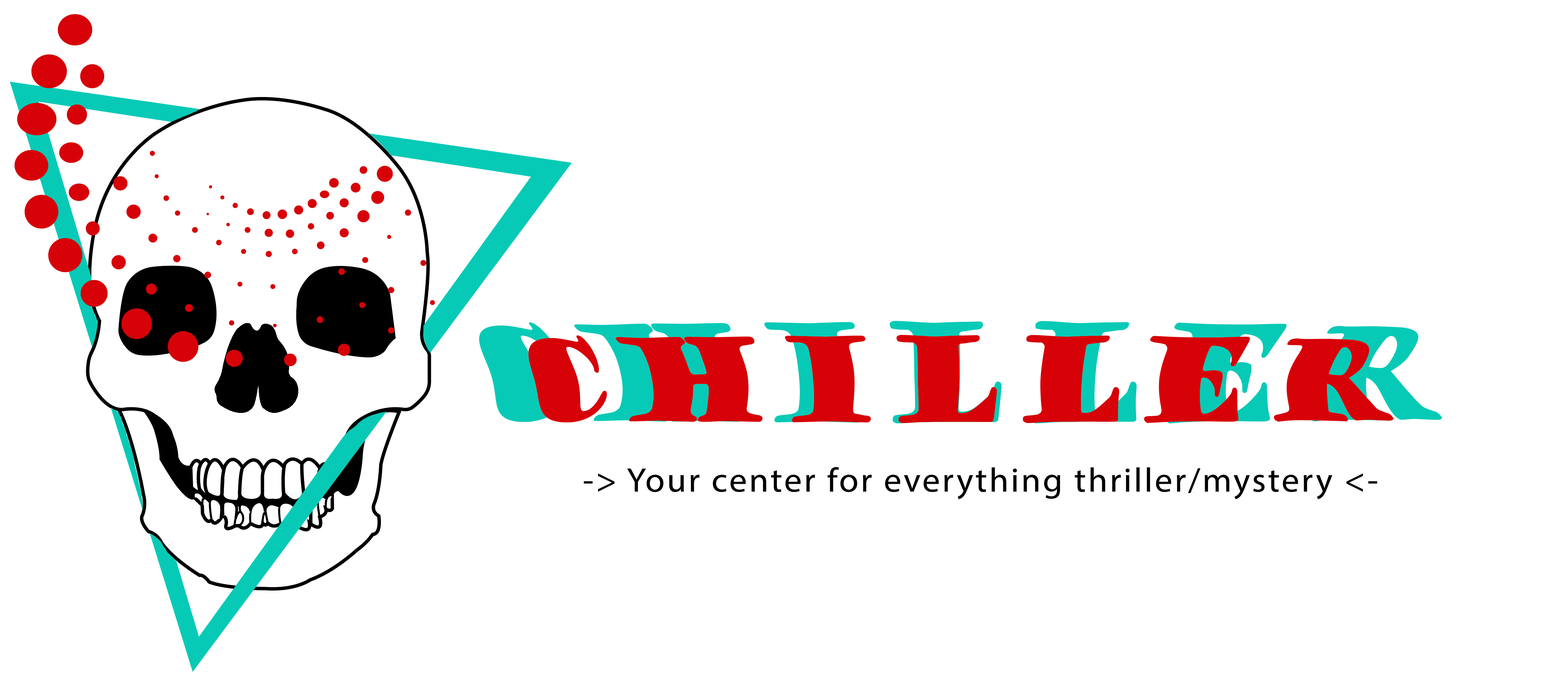
<style>
.page{position:relative;width:1568px;height:686px;background:#ffffff}
.page>*{position:absolute;margin:0}
.t1{font:119.8px "GoudyStout";letter-spacing:0.06em;scale:1.04 1}
.t2{font:105.5px "GoudyStout";letter-spacing:0.06em;color:#d60208;scale:1.04 1}
.t3{font:34px "MyriadPro-Regular";letter-spacing:0.06em;color:#000000;scale:1.04 1}
</style>
<div class="page">
<p class="t1" style="left:479px;top:321px;width:963px;height:103px">Chiller</p>
<p class="t2" style="left:528px;top:335px;width:866px;height:88px">Chiller</p>
<p class="t3" style="left:584px;top:467px;width:793px;height:32px">-&gt; Your center for everything thriller/mystery &lt;-</p>
</div>
